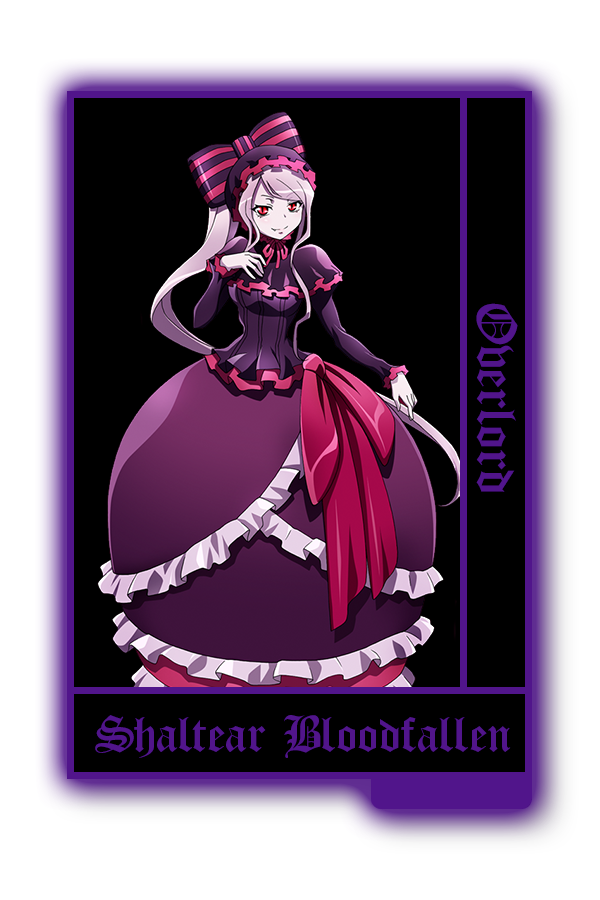
<style>
.page{position:relative;width:600px;height:900px;background:#000000}
.page>*{position:absolute;margin:0}
.t1{font:61.5px "OldLondon";color:#51158b}
.t2{font:55.4px "OldLondon";color:#51158b}
</style>
<div class="page">
<p class="t1" style="left:476px;top:303px;width:42px;height:189px;rotate:90deg">Overlord</p>
<p class="t2" style="left:95px;top:715px;width:416px;height:43px">Shaltear Bloodfallen</p>
</div>
